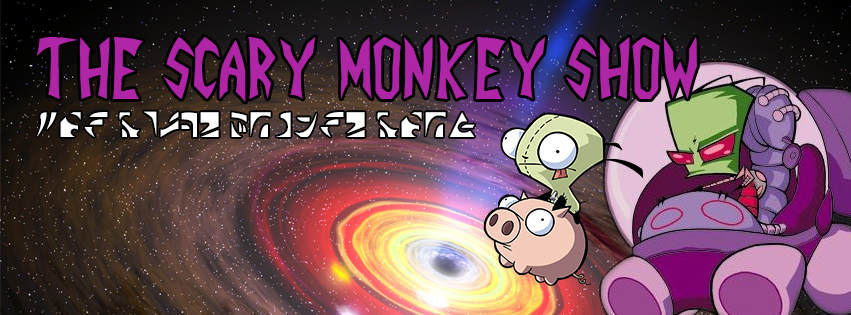
<style>
.page{position:relative;width:851px;height:315px}
.page>*{position:absolute;margin:0}
.t1{font:83px "INVADER";letter-spacing:0.005em;color:#ae26a6}
.t2{font:36px "Irken";letter-spacing:0.005em;color:#ffffff}
</style>
<div class="page">
<p class="t1" style="left:37px;top:37px;width:660px;height:65px">The Scary Monkey Show</p>
<p class="t2" style="left:37px;top:111px;width:438px;height:26px">The scary Monkey show</p>
</div>
